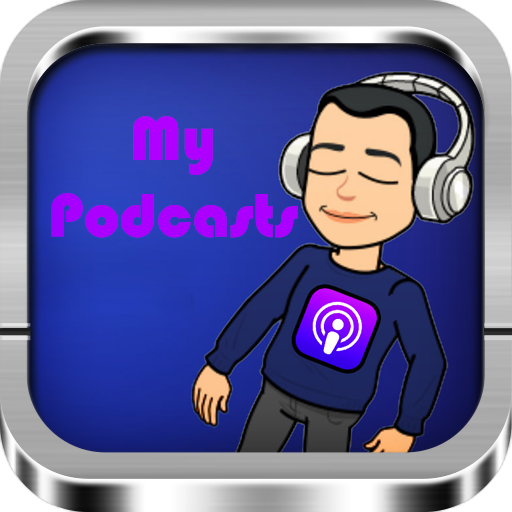
<style>
.page{position:relative;width:512px;height:512px}
.page>*{position:absolute;margin:0}
.t1{font:64px "Bauhaus93";color:#a900ff}
</style>
<div class="page">
<p class="t1" style="left:51px;top:116px;width:247px;height:122px;text-align:center">My<br>Podcasts</p>
</div>
